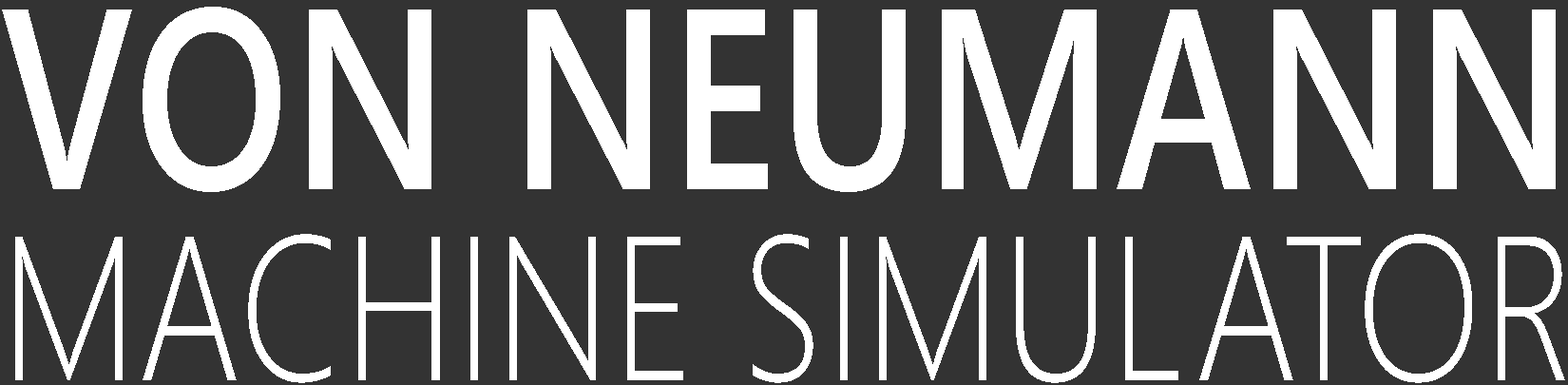
<style>
.page{position:relative;width:1568px;height:385px;background:#333333}
.page>*{position:absolute;margin:0}
.t1{font:205.1px/191.4px "WeblySleekUILight";letter-spacing:0.01em;color:#ffffff;scale:0.8 1}
.t2{font:256.4px/191.4px "WeblySleekUISemibold";letter-spacing:0.01em;color:#ffffff;scale:0.8 1}
</style>
<div class="page">
<p class="t1" style="left:2px;top:7px;width:1563px;height:376px;text-align:center"><span class="t2">VON NEUMANN<br></span>MACHINE SIMULATOR</p>
</div>
